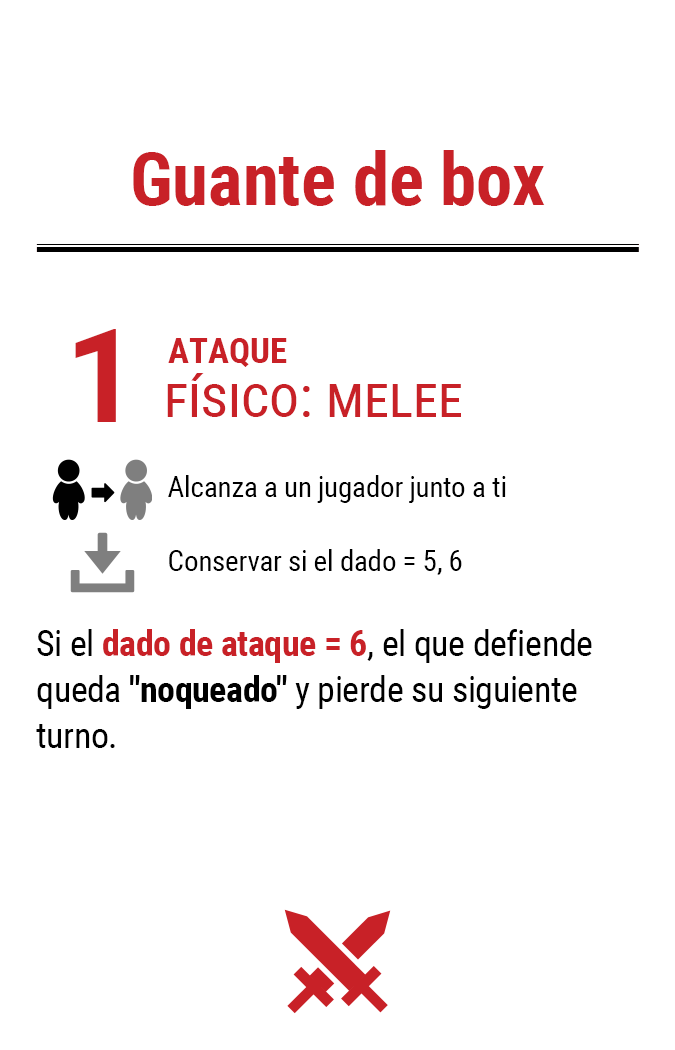
<style>
.page{position:relative;width:675px;height:1050px;background:#ffffff}
.page>*{position:absolute;margin:0}
.t1{font:72.9px "RobotoCondensed-Bold";color:#c82127}
.t2{font:130px "Roboto-Bold";letter-spacing:-0.06em;color:#c82127}
.t3{font:35px "RobotoCondensed-Bold";color:#c82127}
.t4{font:58.3px "RobotoCondensed-Regular";color:#c82127;font-variant:small-caps}
.t5{font:29.2px "RobotoCondensed-Regular";letter-spacing:-0.01em;color:#000000}
.t6{font:35.8px/45.8px "RobotoCondensed-Regular";letter-spacing:-0.01em;color:#000000}
.t7{font:35.8px/45.8px "RobotoCondensed-Bold";letter-spacing:-0.01em;color:#c82127}
.t8{font:35.8px/45.8px "RobotoCondensed-Bold";letter-spacing:-0.01em;color:#000000}
</style>
<div class="page">
<p class="t1" style="left:133px;top:150px;width:412px;height:56px">Guante de box</p>
<p class="t2" style="left:75px;top:329px;width:41px;height:93px">1</p>
<p class="t3" style="left:168px;top:338px;width:119px;height:29px">ATAQUE</p>
<p class="t4" style="left:167px;top:373px;width:294px;height:44px">físico: melee</p>
<p class="t5" style="left:168px;top:475px;width:338px;height:28px">Alcanza a un jugador junto a ti</p>
<p class="t5" style="left:169px;top:549px;width:293px;height:26px">Conservar si el dado = 5, 6</p>
<p class="t6" style="left:36px;top:629px;width:556px;height:119px">Si el <span class="t7">dado de ataque = 6</span>, el que defiende queda <span class="t8">"noqueado"</span> y pierde su siguiente turno.</p>
</div>
